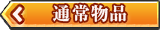
<style>
.page{position:relative;width:160px;height:30px}
.page>*{position:absolute;margin:0}
.t1{font:18px "RyuminPr6N-ExBold";letter-spacing:0.075em;color:#fff6f3}
</style>
<div class="page">
<p class="t1" style="left:53px;top:4px;width:74px;height:18px">通常物品</p>
</div>
